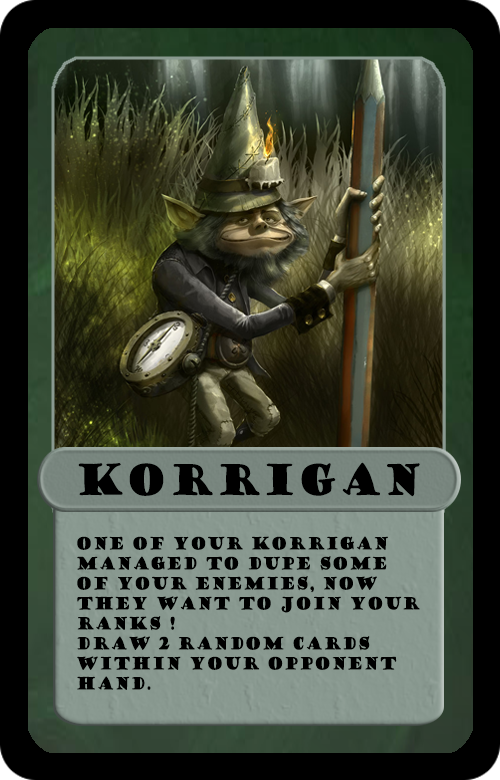
<style>
.page{position:relative;width:500px;height:780px;background:#000000}
.page>*{position:absolute;margin:0}
.t1{font:41.7px "GoudyStout";letter-spacing:0.03em;color:#000000;scale:0.8 1}
.t2{font:16.7px "GoudyStout";letter-spacing:0.03em;color:#000000;scale:0.8 1}
</style>
<div class="page">
<p class="t1" style="left:78px;top:462px;width:342px;height:35px">KORRIGAN</p>
<p class="t2" style="left:77px;top:536px;width:343px;height:154px">one of your Korrigan  managed to dupe some of your enemies, now they want to join your ranks ! <br>draw 2 random cards within your opponent hand.</p>
</div>
